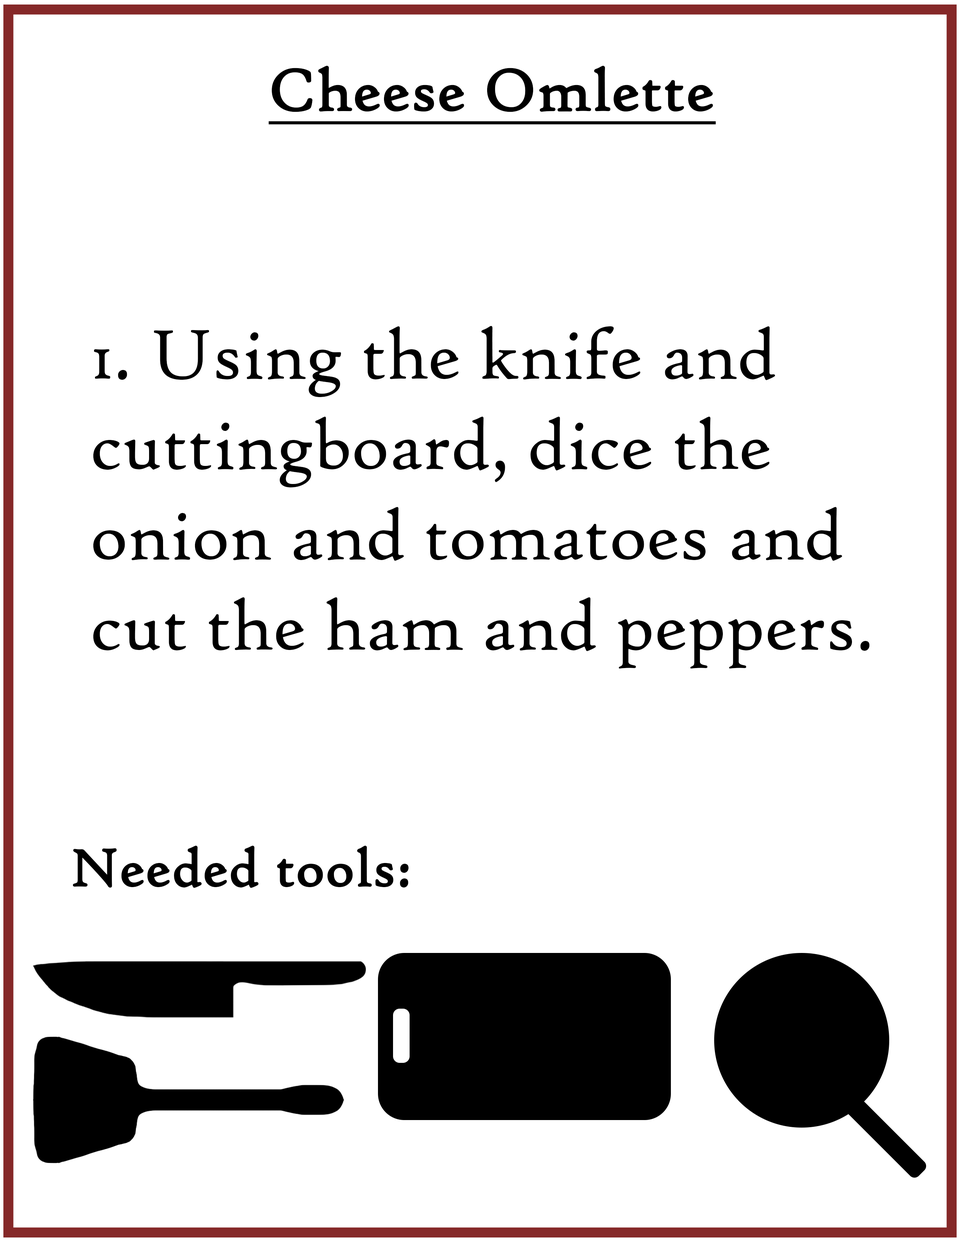
<style>
.page{position:relative;width:960px;height:1242px;background:#ffffff}
.page>*{position:absolute;margin:0}
.t1{font:62.7px "HighTowerText-Reg";color:#000000;font-weight:bold;text-decoration:underline}
.t2{font:75.3px "HighTowerText-Reg";color:#000000}
.t3{font:56.5px "HighTowerText-Reg";color:#000000;font-weight:bold}
</style>
<div class="page">
<p class="t1" style="left:268px;top:65px;width:448px;height:60px">Cheese Omlette</p>
<p class="t2" style="left:93px;top:326px;width:777px;height:343px">1. Using the knife and cuttingboard, dice the onion and tomatoes and cut the ham and peppers.</p>
<p class="t3" style="left:73px;top:845px;width:336px;height:43px">Needed tools:</p>
</div>
